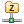
<style>
.page{position:relative;width:24px;height:24px;background:#ffffff}
.page>*{position:absolute;margin:0}
.t1{font:8px "MyriadPro-Regular";color:#252525}
</style>
<div class="page">
<p class="t1" style="left:9px;top:5px;width:5px;height:6px">Z</p>
</div>
